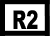
<style>
.page{position:relative;width:50px;height:36px;background:#000000}
.page>*{position:absolute;margin:0}
.t1{font:26px "Arial-Black";color:#000000;scale:0.69 1}
</style>
<div class="page">
<p class="t1" style="left:13px;top:10px;width:25px;height:19px">R2</p>
</div>
